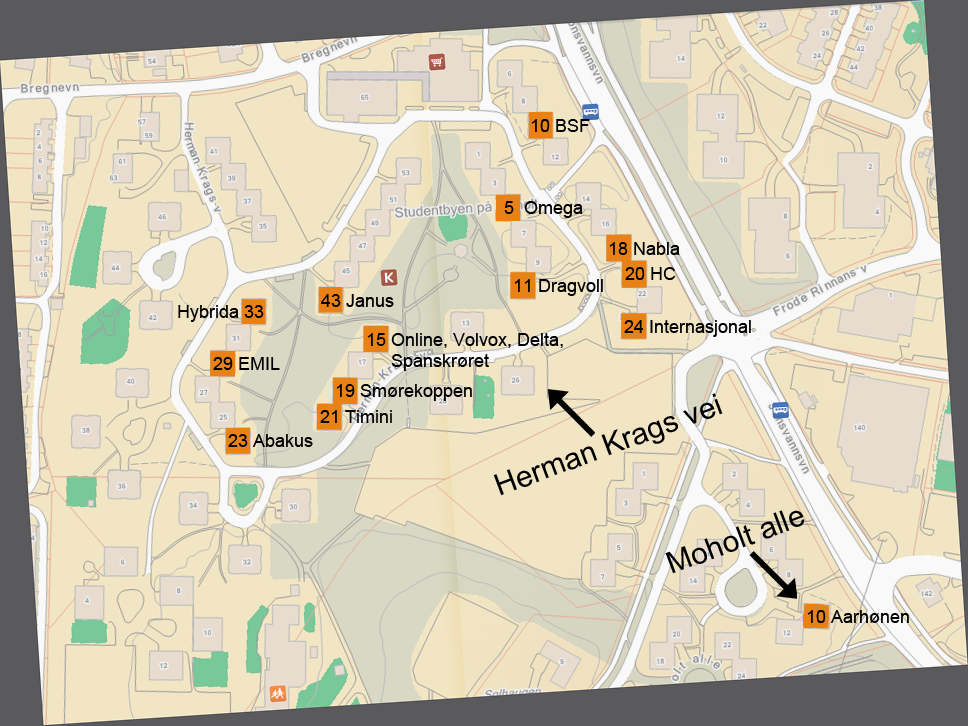
<style>
.page{position:relative;width:968px;height:726px;background:#f1e5c3}
.page>*{position:absolute;margin:0}
.t1{font:18px "ArialMT";color:#000000}
.t2{font:30px "ArialMT";color:#000000}
</style>
<div class="page">
<p class="t1" style="left:531px;top:119px;width:59px;height:13px">10 BSF</p>
<p class="t1" style="left:504px;top:201px;width:79px;height:17px">5  Omega</p>
<p class="t1" style="left:609px;top:242px;width:71px;height:13px">18 Nabla</p>
<p class="t1" style="left:625px;top:267px;width:51px;height:13px">20 HC</p>
<p class="t1" style="left:514px;top:279px;width:89px;height:17px">11 Dragvoll</p>
<p class="t1" style="left:321px;top:294px;width:73px;height:13px">43 Janus</p>
<p class="t1" style="left:178px;top:305px;width:86px;height:17px">Hybrida 33</p>
<p class="t1" style="left:624px;top:320px;width:127px;height:17px">24 Internasjonal</p>
<p class="t1" style="left:367px;top:333px;width:196px;height:38px">15 Online, Volvox, Delta, <br>     Spanskrøret</p>
<p class="t1" style="left:213px;top:357px;width:67px;height:13px">29 EMIL</p>
<p class="t1" style="left:336px;top:384px;width:136px;height:17px">19 Smørekoppen</p>
<p class="t2" style="left:493px;top:393px;width:230px;height:103px;rotate:-20deg">Herman Krags vei</p>
<p class="t1" style="left:320px;top:410px;width:72px;height:13px">21 Timini</p>
<p class="t1" style="left:228px;top:434px;width:85px;height:13px">23 Abakus</p>
<p class="t2" style="left:665px;top:510px;width:140px;height:64px;rotate:-20deg">Moholt alle</p>
<p class="t1" style="left:807px;top:610px;width:102px;height:13px">10 Aarhønen</p>
</div>
